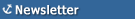
<style>
.page{position:relative;width:135px;height:19px;background:#336699}
.page>*{position:absolute;margin:0}
.t1{font:12px "Tahoma";letter-spacing:0.04em;color:#ffffff;font-weight:bold}
</style>
<div class="page">
<p class="t1" style="left:15px;top:5px;width:64px;height:10px">Newsletter</p>
</div>
